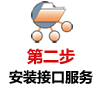
<style>
.page{position:relative;width:100px;height:90px;background:#ffffff}
.page>*{position:absolute;margin:0}
.t1{font:16px "MicrosoftYaHei";color:#d70707}
.t2{font:14px "MicrosoftYaHei";color:#000000}
</style>
<div class="page">
<p class="t1" style="left:27px;top:48px;width:48px;height:17px">第二步</p>
<p class="t2" style="left:9px;top:70px;width:84px;height:14px">安装接口服务</p>
</div>
